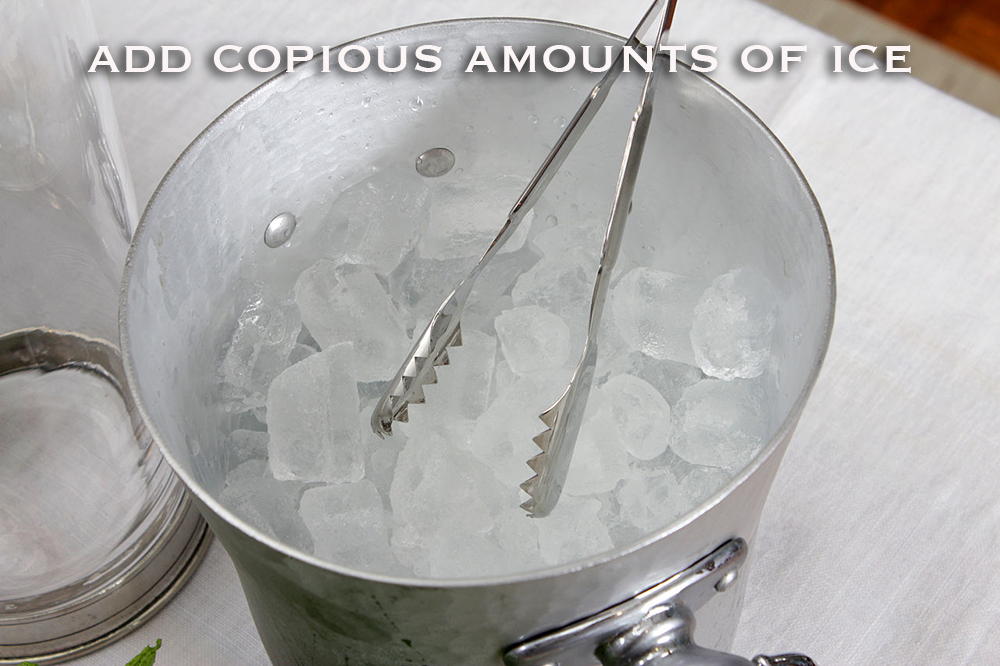
<style>
.page{position:relative;width:1000px;height:666px}
.page>*{position:absolute;margin:0}
.t1{font:60px "Copperplate";color:#fbf5f5}
</style>
<div class="page">
<p class="t1" style="left:87px;top:44px;width:824px;height:29px">add copious amounts of ice</p>
</div>
